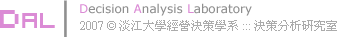
<style>
.page{position:relative;width:337px;height:37px;background:#ffffff}
.page>*{position:absolute;margin:0}
.t1{font:24px "04b08";color:#db8bd5}
.t2{font:30px "04b08";color:#db8bd5}
.t3{font:30px "ArialMT";color:#8f8f8f}
.t4{font:12px "Verdana";color:#8f8f8f}
.t5{font:12px "Verdana";color:#db8bd5}
.t6{font:12px "PMingLiU";color:#ababab}
</style>
<div class="page">
<p class="t1" style="left:0px;top:0px;width:67px;height:37px"><span class="t2">D</span>AL<span class="t3">│</span></p>
<p class="t4" style="left:80px;top:3px;width:172px;height:13px"><span class="t5">D</span>ecision <span class="t5">A</span>nalysis <span class="t5">L</span>aboratory</p>
<p class="t6" style="left:80px;top:20px;width:257px;height:11px">2007 © 淡江大學經營決策學系:::決策分析研究室</p>
</div>
